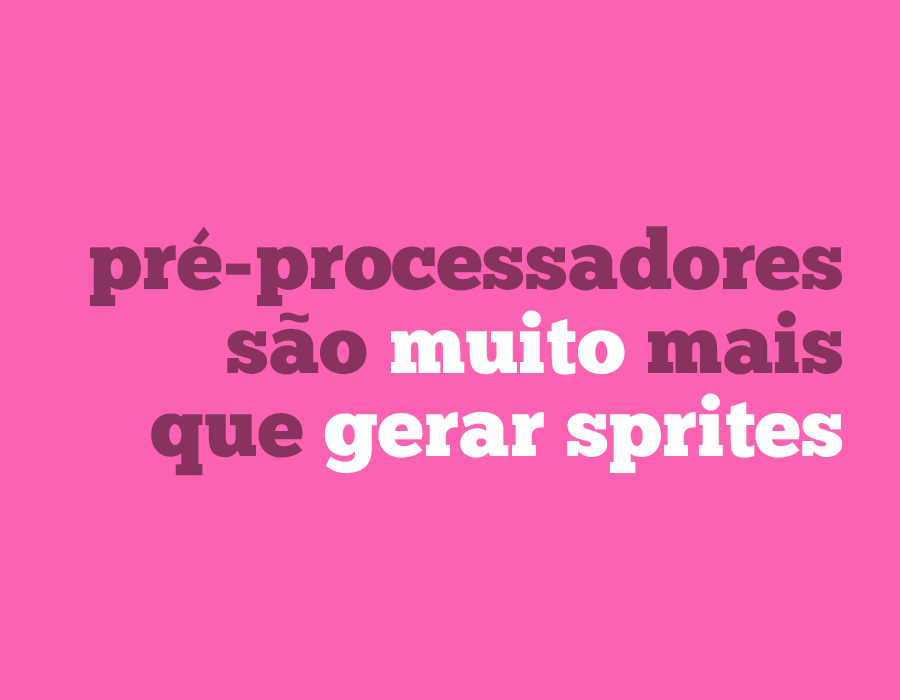
<style>
.page{position:relative;width:900px;height:700px;background:#fc62b2}
.page>*{position:absolute;margin:0}
.t1{font:83.5px/83.5px "ChunkFive-Roman";color:#88335f}
.t2{font:83.5px/83.5px "ChunkFive-Roman";color:#ffffff}
.t3{font:72.7px "ChunkFive-Roman";color:#88335f}
</style>
<div class="page">
<p class="t1" style="left:90px;top:226px;width:753px;height:250px;text-align:right">pré-processadores<br>sao <span class="t2">muito</span> mais<br>que <span class="t2">gerar sprites</span></p>
<p class="t3" style="left:280px;top:312px;width:29px;height:11px">~</p>
</div>
